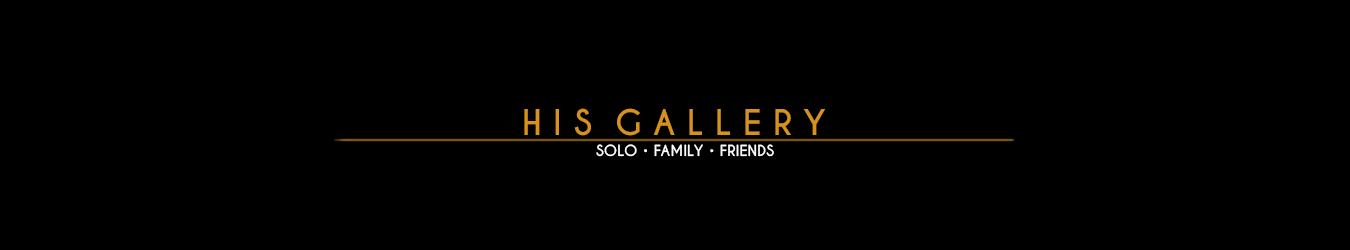
<style>
.page{position:relative;width:1350px;height:250px;background:#000000}
.page>*{position:absolute;margin:0}
.t1{font:33.3px "CaviarDreams-Bold";color:#d5921d}
.t2{font:14.6px "CaviarDreams-Bold";color:#ffffff}
</style>
<div class="page">
<p class="t1" style="left:524px;top:108px;width:301px;height:28px">H I S  G A L L E R Y</p>
<p class="t2" style="left:596px;top:144px;width:178px;height:13px">SOLO • FAMILY • FRIENDS</p>
</div>
